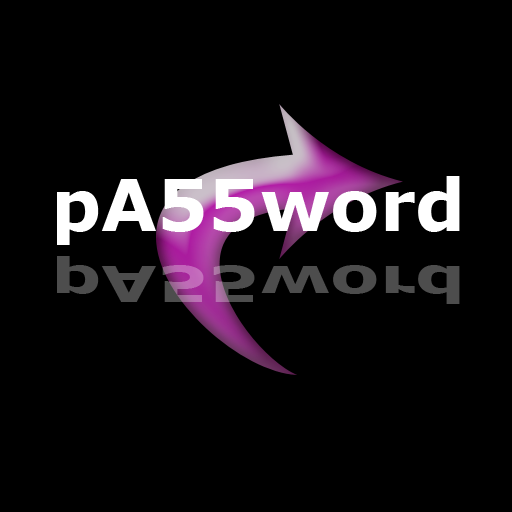
<style>
.page{position:relative;width:512px;height:512px;background:#000000}
.page>*{position:absolute;margin:0}
.t1{font:72px "Verdana-Bold";color:#ffffff}
.t2{font:49.6px "Verdana-Bold";color:#4d4d4d;scale:1.45 1}
</style>
<div class="page">
<p class="t1" style="left:57px;top:176px;width:403px;height:69px">pA55word</p>
<p class="t2" style="left:57px;top:256px;width:403px;height:48px">pA55word</p>
</div>
